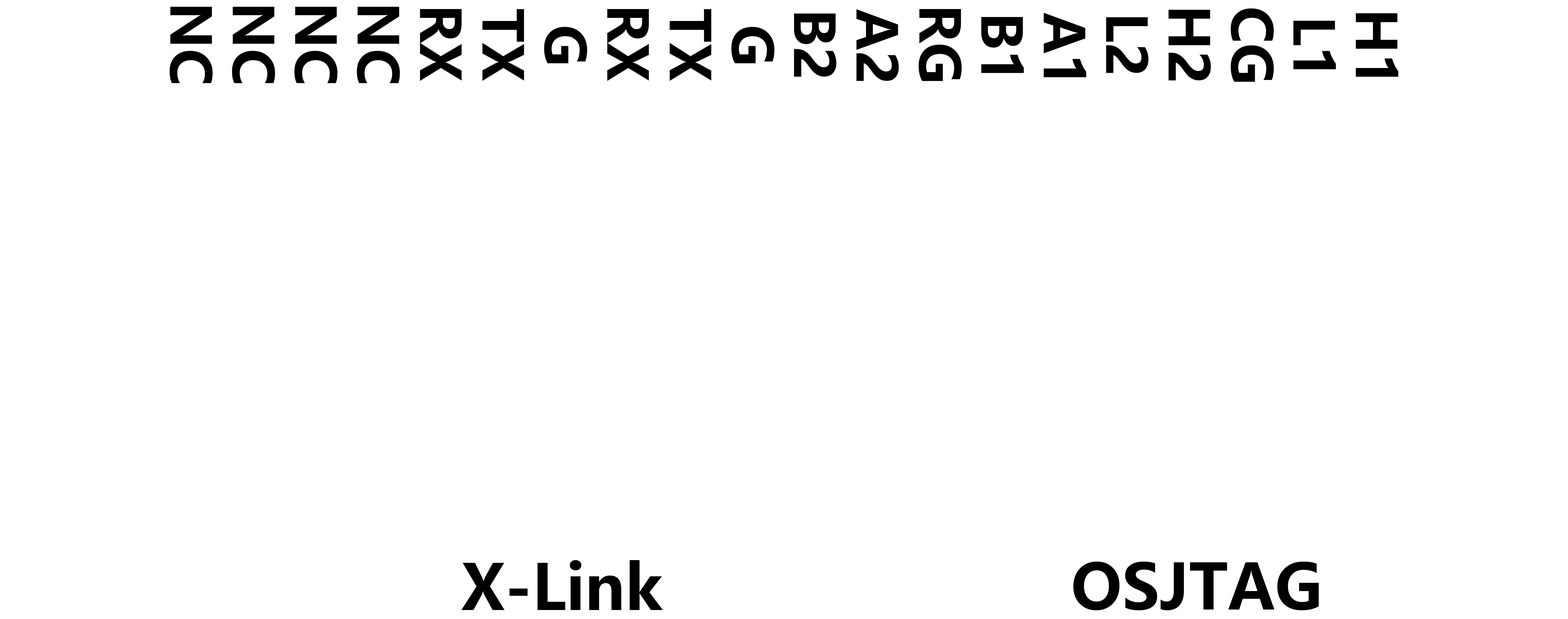
<style>
.page{position:relative;width:1568px;height:619px;background:#ffffff}
.page>*{position:absolute;margin:0}
.t1{font:54.9px "MicrosoftYaHei-Bold";color:#000000}
.t2{font:62.4px "MicrosoftYaHei-Bold";color:#000000}
</style>
<div class="page">
<p class="t1" style="left:170px;top:7px;width:43px;height:76px;rotate:90deg">NC</p>
<p class="t1" style="left:232px;top:7px;width:43px;height:76px;rotate:90deg">NC</p>
<p class="t1" style="left:294px;top:7px;width:44px;height:76px;rotate:90deg">NC</p>
<p class="t1" style="left:357px;top:7px;width:43px;height:76px;rotate:90deg">NC</p>
<p class="t1" style="left:420px;top:9px;width:42px;height:72px;rotate:90deg">RX</p>
<p class="t1" style="left:482px;top:9px;width:42px;height:72px;rotate:90deg">TX</p>
<p class="t1" style="left:607px;top:9px;width:42px;height:72px;rotate:90deg">RX</p>
<p class="t1" style="left:670px;top:9px;width:41px;height:72px;rotate:90deg">TX</p>
<p class="t1" style="left:794px;top:13px;width:42px;height:64px;rotate:90deg">B2</p>
<p class="t1" style="left:856px;top:9px;width:43px;height:72px;rotate:90deg">A2</p>
<p class="t1" style="left:919px;top:9px;width:43px;height:72px;rotate:90deg">RG</p>
<p class="t1" style="left:981px;top:17px;width:43px;height:56px;rotate:90deg">B1</p>
<p class="t1" style="left:1044px;top:13px;width:42px;height:64px;rotate:90deg">A1</p>
<p class="t1" style="left:1106px;top:17px;width:43px;height:56px;rotate:90deg">L2</p>
<p class="t1" style="left:1169px;top:10px;width:42px;height:71px;rotate:90deg">H2</p>
<p class="t1" style="left:1231px;top:8px;width:43px;height:74px;rotate:90deg">CG</p>
<p class="t1" style="left:1356px;top:13px;width:42px;height:64px;rotate:90deg">H1</p>
<p class="t1" style="left:544px;top:27px;width:43px;height:36px;rotate:90deg">G</p>
<p class="t1" style="left:731px;top:27px;width:44px;height:36px;rotate:90deg">G</p>
<p class="t1" style="left:1293px;top:21px;width:43px;height:48px;rotate:90deg">L1</p>
<p class="t2" style="left:461px;top:560px;width:202px;height:50px">X-Link</p>
<p class="t2" style="left:1073px;top:562px;width:246px;height:48px">OSJTAG</p>
</div>
